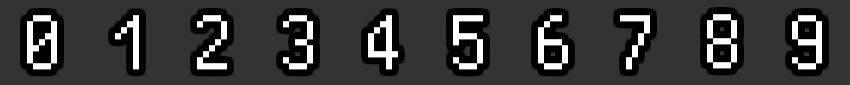
<style>
.page{position:relative;width:850px;height:85px;background:#333333}
.page>*{position:absolute;margin:0}
.t1{font:60px "BestTenDOT";letter-spacing:0.2em;color:#ffffff}
</style>
<div class="page">
<p class="t1" style="left:27px;top:15px;width:30px;height:55px">0</p>
<p class="t1" style="left:115px;top:15px;width:24px;height:55px">1</p>
<p class="t1" style="left:197px;top:15px;width:30px;height:55px">2</p>
<p class="t1" style="left:283px;top:15px;width:30px;height:55px">3</p>
<p class="t1" style="left:368px;top:15px;width:30px;height:55px">4</p>
<p class="t1" style="left:453px;top:15px;width:30px;height:55px">5</p>
<p class="t1" style="left:538px;top:15px;width:30px;height:55px">6</p>
<p class="t1" style="left:620px;top:15px;width:30px;height:55px">7</p>
<p class="t1" style="left:707px;top:14px;width:30px;height:55px">8</p>
<p class="t1" style="left:792px;top:15px;width:30px;height:55px">9</p>
</div>
